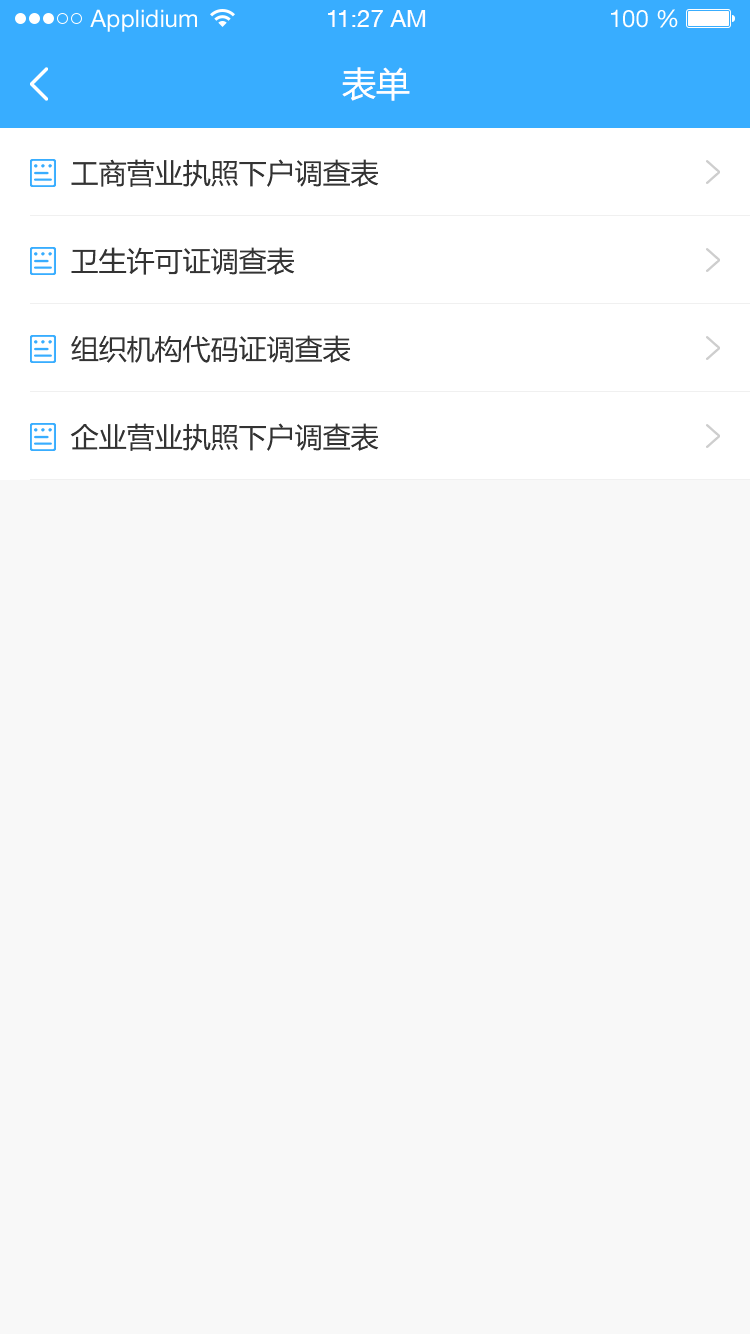
<style>
.page{position:relative;width:750px;height:1334px;background:#f8f8f8}
.page>*{position:absolute;margin:0}
.t1{font:24px "HelveticaNeueLTStd-Roman";color:#ffffff}
.t2{font:24px "HelveticaNeueCE-Roman";color:#ffffff}
.t3{font:34px "MicrosoftYaHei";color:#ffffff}
.t4{font:28px "MicrosoftYaHei";color:#333333}
</style>
<div class="page">
<p class="t1" style="left:90px;top:9px;width:107px;height:23px">Applidium</p>
<p class="t2" style="left:328px;top:10px;width:98px;height:17px">11:27 AM</p>
<p class="t1" style="left:611px;top:9px;width:67px;height:19px">100 %</p>
<p class="t3" style="left:342px;top:67px;width:68px;height:34px">表单</p>
<p class="t4" style="left:71px;top:159px;width:308px;height:28px">工商营业执照下户调查表</p>
<p class="t4" style="left:71px;top:247px;width:224px;height:28px">卫生许可证调查表</p>
<p class="t4" style="left:71px;top:335px;width:280px;height:28px">组织机构代码证调查表</p>
<p class="t4" style="left:70px;top:423px;width:309px;height:28px">企业营业执照下户调查表</p>
</div>
